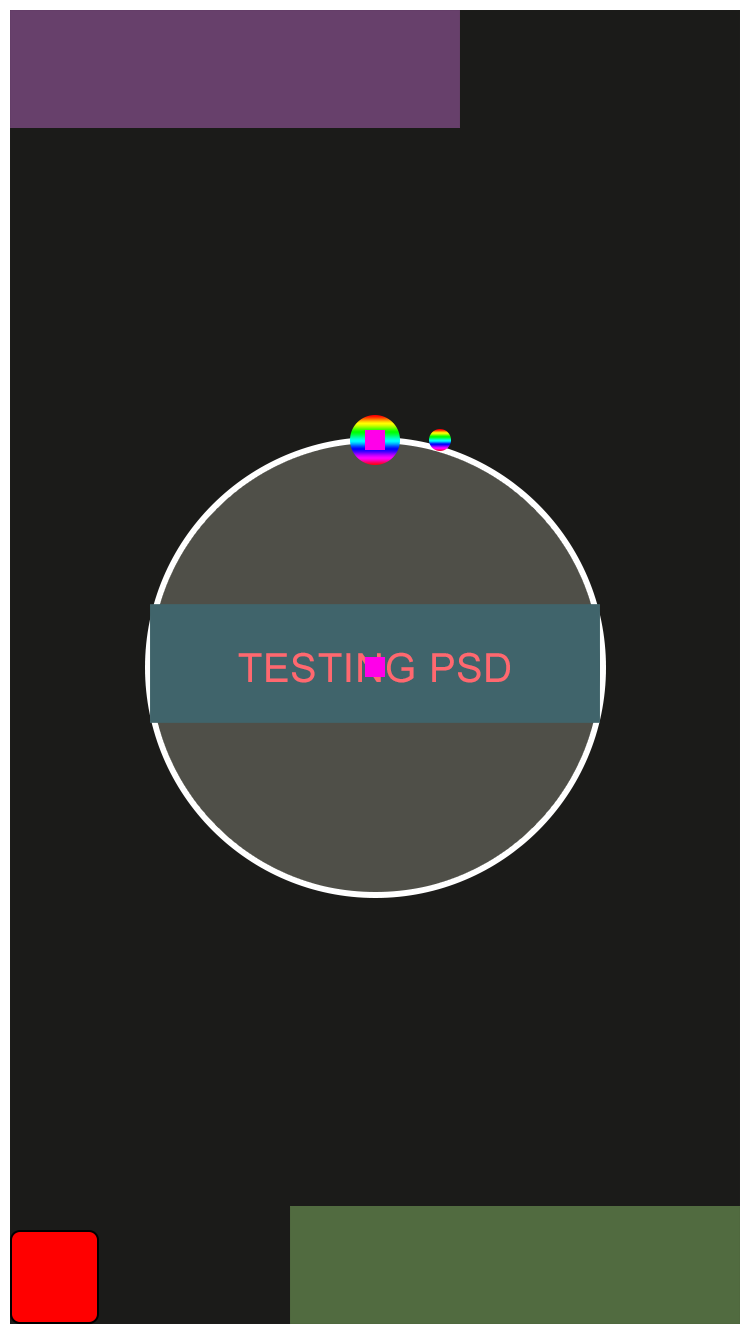
<style>
.page{position:relative;width:750px;height:1334px;background:#1b1b19}
.page>*{position:absolute;margin:0}
.t1{font:40px "ArialMT";letter-spacing:0.02em;color:#ff686f}
</style>
<div class="page">
<p class="t1" style="left:238px;top:652px;width:272px;height:31px">TESTING PSD</p>
</div>
